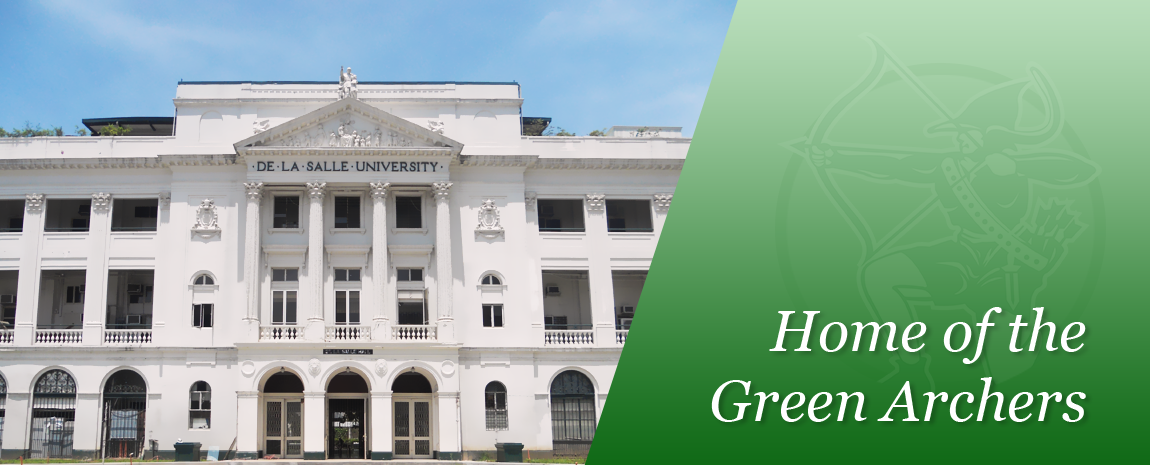
<style>
.page{position:relative;width:1150px;height:465px}
.page>*{position:absolute;margin:0}
.t1{font:58.3px "Georgia-Italic";color:#ffffff}
</style>
<div class="page">
<p class="t1" style="left:711px;top:307px;width:375px;height:115px;text-align:right">Home of the<br>Green Archers</p>
</div>
